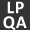
<style>
.page{position:relative;width:30px;height:30px;background:#333333}
.page>*{position:absolute;margin:0}
.t1{font:18px "Calibri-Bold";letter-spacing:0.03em;color:#ffffff}
</style>
<div class="page">
<p class="t1" style="left:7px;top:1px;width:17px;height:13px">LP</p>
<p class="t1" style="left:3px;top:16px;width:24px;height:14px">QA</p>
</div>
